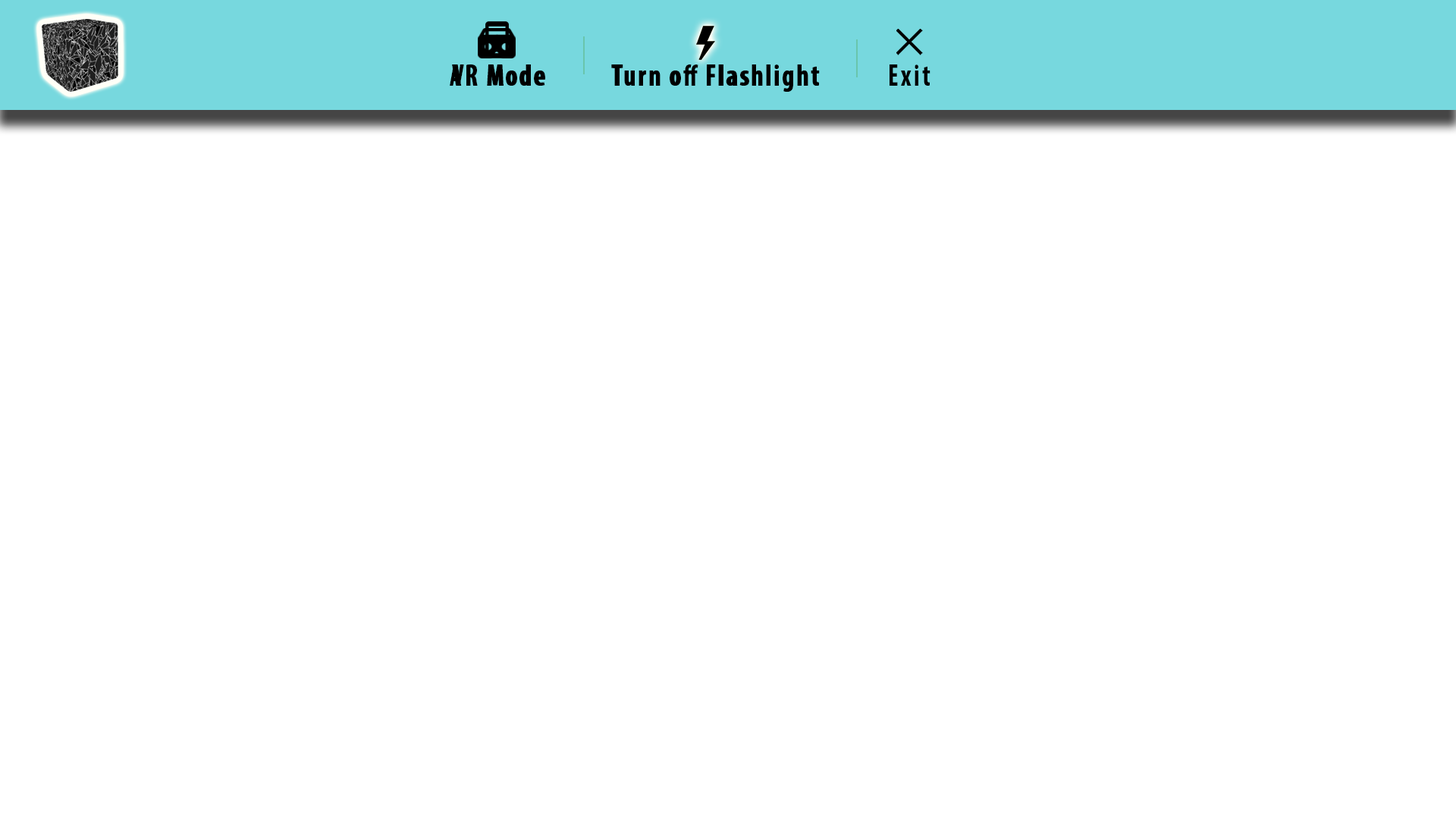
<style>
.page{position:relative;width:1456px;height:819px;background:#ffffff}
.page>*{position:absolute;margin:0}
.t1{font:30.5px "MyriadPro-BoldCond";letter-spacing:0.089em;color:#000000;scale:0.87 1}
</style>
<div class="page">
<p class="t1" style="left:450px;top:64px;width:94px;height:22px">AR Mode</p>
<p class="t1" style="left:452px;top:64px;width:93px;height:22px">VR Mode</p>
<p class="t1" style="left:611px;top:64px;width:209px;height:28px">Turn off Flashlight</p>
<p class="t1" style="left:613px;top:64px;width:206px;height:28px">Turn on Flashlight</p>
<p class="t1" style="left:890px;top:64px;width:40px;height:22px">Exit</p>
</div>
